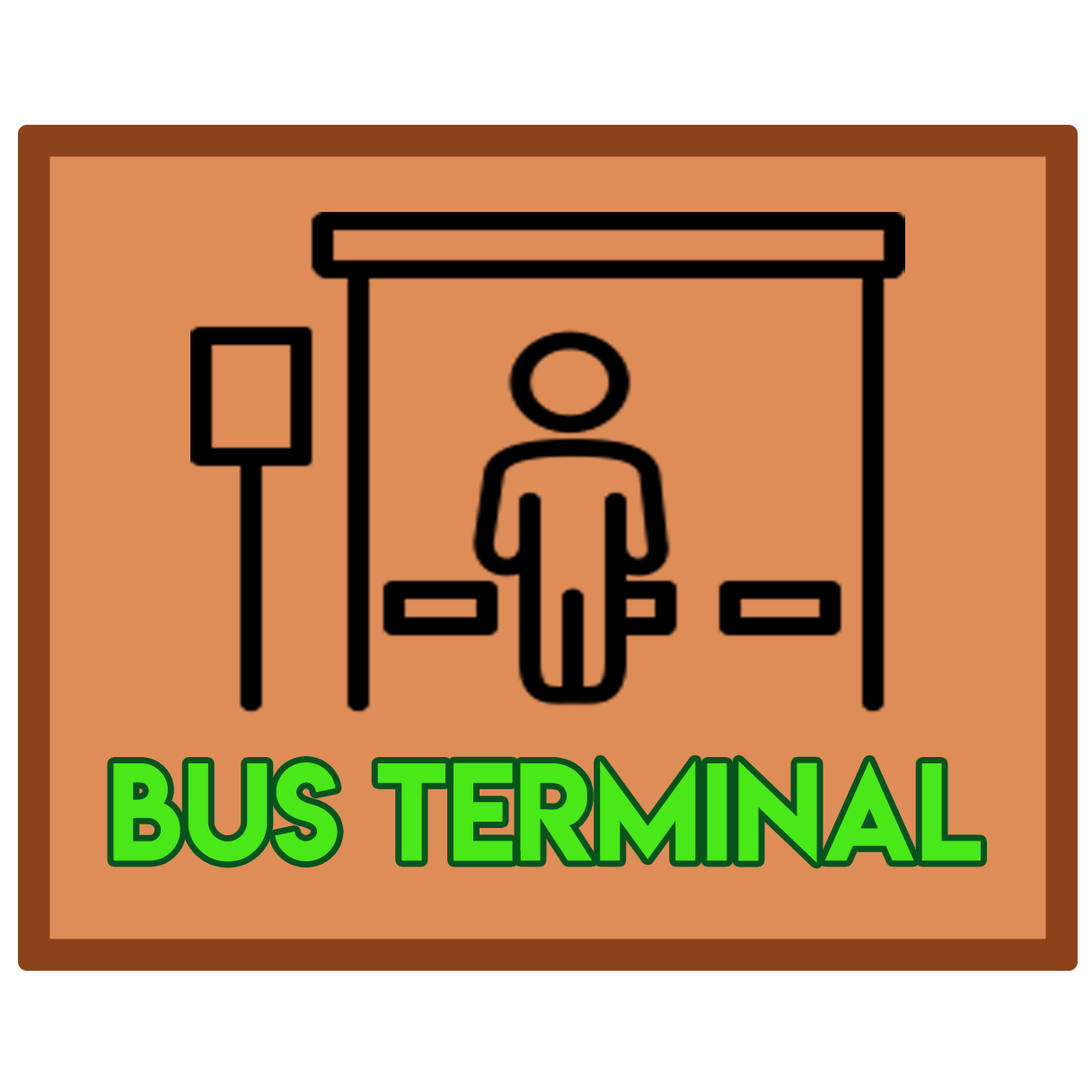
<style>
.page{position:relative;width:1092px;height:1092px;background:#de8d59}
.page>*{position:absolute;margin:0}
.t1{font:123.2px "LemonMilk";color:#49e818}
</style>
<div class="page">
<p class="t1" style="left:113px;top:761px;width:868px;height:102px">BUS TERMINAL</p>
</div>
